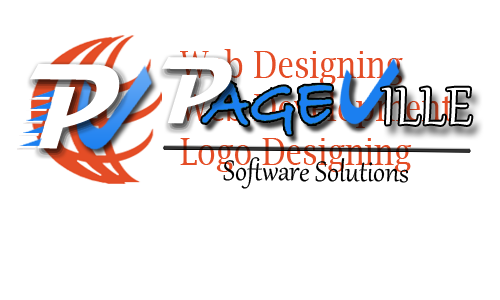
<style>
.page{position:relative;width:500px;height:300px;background:#ffffff}
.page>*{position:absolute;margin:0}
.t1{font:36.5px "LucidaBright";scale:0.85 1}
.t2{font:122.2px "Magneto-Bold";color:#ffffff;scale:0.88 1}
.t3{font:95.9px "Magneto-Bold";color:#ffffff;scale:0.88 1}
.t4{font:65.1px "Gabriola";color:#ffffff;scale:0.96 1}
.t5{font:34.6px "Gabriola";color:#000000;scale:0.96 1}
</style>
<div class="page">
<p class="t1" style="left:180px;top:49px;width:273px;height:123px">Web Designing<br>Web Development<br>Logo Designing</p>
<p class="t2" style="left:30px;top:64px;width:90px;height:85px;rotate:1deg">P</p>
<p class="t3" style="left:161px;top:57px;width:71px;height:67px;rotate:1deg">P</p>
<p class="t4" style="left:381px;top:87px;width:91px;height:38px;rotate:1deg">ILLE</p>
<p class="t5" style="left:223px;top:157px;width:185px;height:32px;rotate:1deg">Software Solutions</p>
</div>
